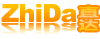
<style>
.page{position:relative;width:100px;height:39px;background:#ffffff}
.page>*{position:absolute;margin:0}
.t1{font:25.3px "Arial-Black";letter-spacing:-0.04em}
.t2{font:11.7px/13.6px "MicrosoftYaHei";letter-spacing:-0.04em;font-weight:bold;scale:1.68 1}
.t3{font:15.1px "Arial-Black";letter-spacing:-0.04em;scale:1.69 1}
</style>
<div class="page">
<p class="t1" style="left:1px;top:4px;width:76px;height:19px">ZhiDa</p>
<p class="t2" style="left:78px;top:6px;width:21px;height:25px">直<br>达</p>
<p class="t3" style="left:1px;top:23px;width:76px;height:11px">ZhiDa</p>
</div>
